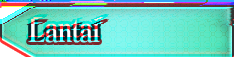
<style>
.page{position:relative;width:234px;height:57px}
.page>*{position:absolute;margin:0}
.t1{font:27px "RyuminPro-ExBold";letter-spacing:-0.08em}
</style>
<div class="page">
<p class="t1" style="left:28px;top:16px;width:72px;height:22px">Lantai</p>
</div>
